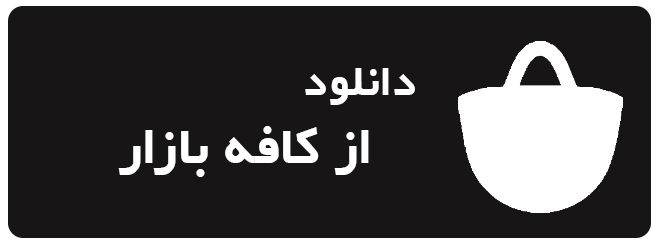
<style>
.page{position:relative;width:658px;height:243px;background:#181516}
.page>*{position:absolute;margin:0}
.t1{font:37.5px "IRYekan-Bold";color:#fffefe}
.t2{font:45.8px "IRYekan-Bold";color:#ffffff}
</style>
<div class="page">
<p class="t1" style="left:305px;top:68px;width:110px;height:37px">دانلود</p>
<p class="t2" style="left:118px;top:126px;width:251px;height:51px">از کافه بازار</p>
</div>
